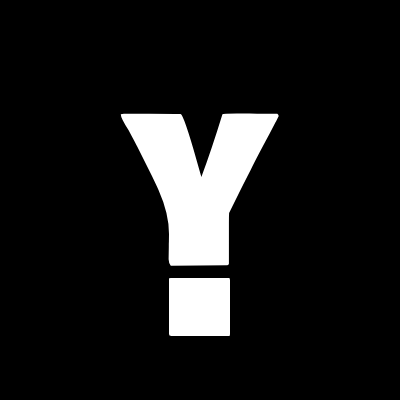
<style>
.page{position:relative;width:400px;height:400px;background:#000000}
.page>*{position:absolute;margin:0}
.t1{font:201.5px "BowlbyOne-Regular";color:#ffffff}
</style>
<div class="page">
<p class="t1" style="left:120px;top:113px;width:159px;height:153px">Y</p>
</div>
